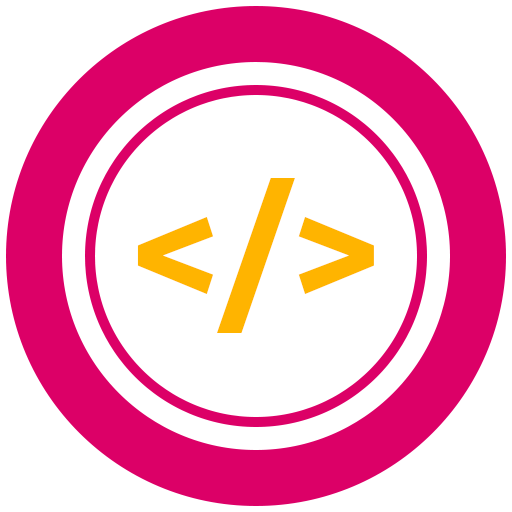
<style>
.page{position:relative;width:512px;height:512px;background:#ffffff}
.page>*{position:absolute;margin:0}
.t1{font:160px "Ubuntu-Bold";color:#ffb400}
</style>
<div class="page">
<p class="t1" style="left:137px;top:178px;width:237px;height:155px">&lt;/&gt;</p>
</div>
